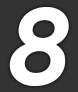
<style>
.page{position:relative;width:78px;height:92px;background:#333333}
.page>*{position:absolute;margin:0}
.t1{font:109.6px "ProductSans-BoldItalic";color:#ffffff}
</style>
<div class="page">
<p class="t1" style="left:9px;top:7px;width:60px;height:79px">8</p>
</div>
